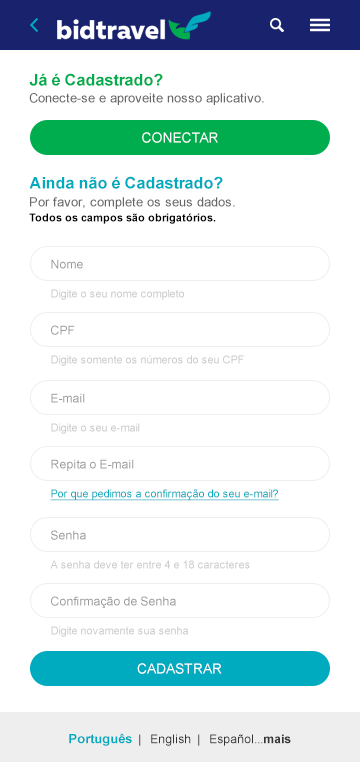
<style>
.page{position:relative;width:360px;height:762px;background:#ffffff}
.page>*{position:absolute;margin:0}
.t1{font:16px "Arial-BoldMT";color:#00ad4e}
.t2{font:13px "ArialMT";color:#666666}
.t3{font:14px "ArialMT";color:#ffffff;text-transform:uppercase}
.t4{font:16px "Arial-BoldMT";color:#00abbf}
.t5{font:13px/18px "ArialMT";color:#666666}
.t6{font:11px/15px "Arial-BoldMT";color:#000000}
.t7{font:12px "ArialMT";color:#999999}
.t8{font:11px "ArialMT";color:#cccccc}
.t9{font:11px "ArialMT";color:#00abbf;text-decoration:underline}
.t10{font:12px "ArialMT";color:#333333}
.t11{font:13px "Arial-BoldMT";color:#00abbf}
.t12{font:12px "Arial-BoldMT";color:#333333}
</style>
<div class="page">
<p class="t1" style="left:29px;top:73px;width:134px;height:13px">Já é Cadastrado?</p>
<p class="t2" style="left:29px;top:93px;width:235px;height:12px">Conecte-se e aproveite nosso aplicativo.</p>
<p class="t3" style="left:142px;top:132px;width:76px;height:11px">conectar</p>
<p class="t4" style="left:29px;top:176px;width:194px;height:13px">Ainda não é Cadastrado?</p>
<p class="t5" style="left:29px;top:197px;width:206px;height:27px">Por favor, complete os seus dados. <br><span class="t6">Todos os campos são obrigatórios.</span></p>
<p class="t7" style="left:51px;top:259px;width:32px;height:10px">Nome</p>
<p class="t8" style="left:51px;top:289px;width:133px;height:11px">Digite o seu nome completo</p>
<p class="t7" style="left:51px;top:325px;width:24px;height:10px">CPF</p>
<p class="t8" style="left:51px;top:355px;width:193px;height:11px">Digite somente os números do seu CPF</p>
<p class="t7" style="left:51px;top:393px;width:34px;height:10px">E-mail</p>
<p class="t8" style="left:51px;top:423px;width:89px;height:11px">Digite o seu e-mail</p>
<p class="t7" style="left:51px;top:459px;width:83px;height:12px">Repita o E-mail</p>
<p class="t9" style="left:50px;top:489px;width:229px;height:12px">Por que pedimos a confirmação do seu e-mail?</p>
<p class="t7" style="left:51px;top:530px;width:35px;height:10px">Senha</p>
<p class="t8" style="left:50px;top:560px;width:200px;height:9px">A senha deve ter entre 4 e 18 caracteres</p>
<p class="t7" style="left:51px;top:596px;width:125px;height:12px">Confirmação de Senha</p>
<p class="t8" style="left:51px;top:626px;width:137px;height:11px">Digite novamente sua senha</p>
<p class="t3" style="left:137px;top:663px;width:85px;height:11px">cadastrar</p>
<p class="t10" style="left:69px;top:733px;width:222px;height:13px"><span class="t11">Português</span>  |   English  |   Español...<span class="t12">mais</span></p>
</div>
